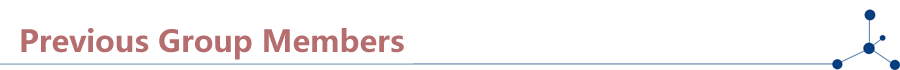
<style>
.page{position:relative;width:900px;height:70px;background:#ffffff}
.page>*{position:absolute;margin:0}
.t1{font:30px "MicrosoftYaHei-Bold";color:#b66d6d}
</style>
<div class="page">
<p class="t1" style="left:21px;top:28px;width:383px;height:32px">Previous Group Members</p>
</div>
